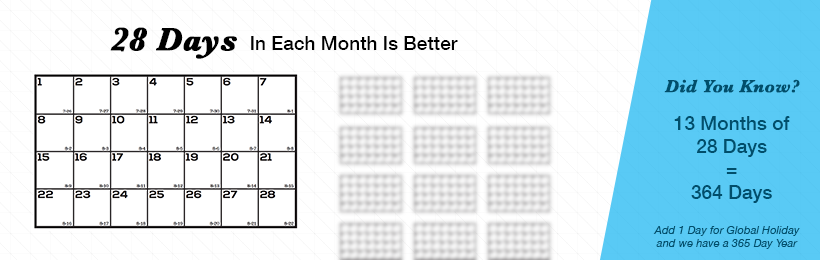
<style>
.page{position:relative;width:820px;height:260px;background:#ffffff}
.page>*{position:absolute;margin:0}
.t1{font:33.2px "Baskerville-BoldItalic";color:#000000;font-weight:bold}
.t2{font:19.1px "HelveticaNeue-Medium";color:#000000}
.t3{font:18.1px "Baskerville-BoldItalic";color:#014e6b;font-weight:bold}
.t4{font:19.1px "HelveticaNeue-Medium";color:#014e6b}
.t5{font:11.2px "HelveticaNeue-Italic";color:#014e6b}
</style>
<div class="page">
<p class="t1" style="left:110px;top:27px;width:127px;height:32px">28 Days</p>
<p class="t2" style="left:251px;top:36px;width:207px;height:14px">In Each Month Is Better</p>
<p class="t3" style="left:664px;top:79px;width:136px;height:14px">Did You Know?</p>
<p class="t4" style="left:674px;top:116px;width:116px;height:87px;text-align:center">13 Months of<br>28 Days<br>=<br>364 Days</p>
<p class="t5" style="left:653px;top:226px;width:147px;height:23px;text-align:center">Add 1 Day for Global Holiday<br>and we have a 365 Day Year</p>
</div>
